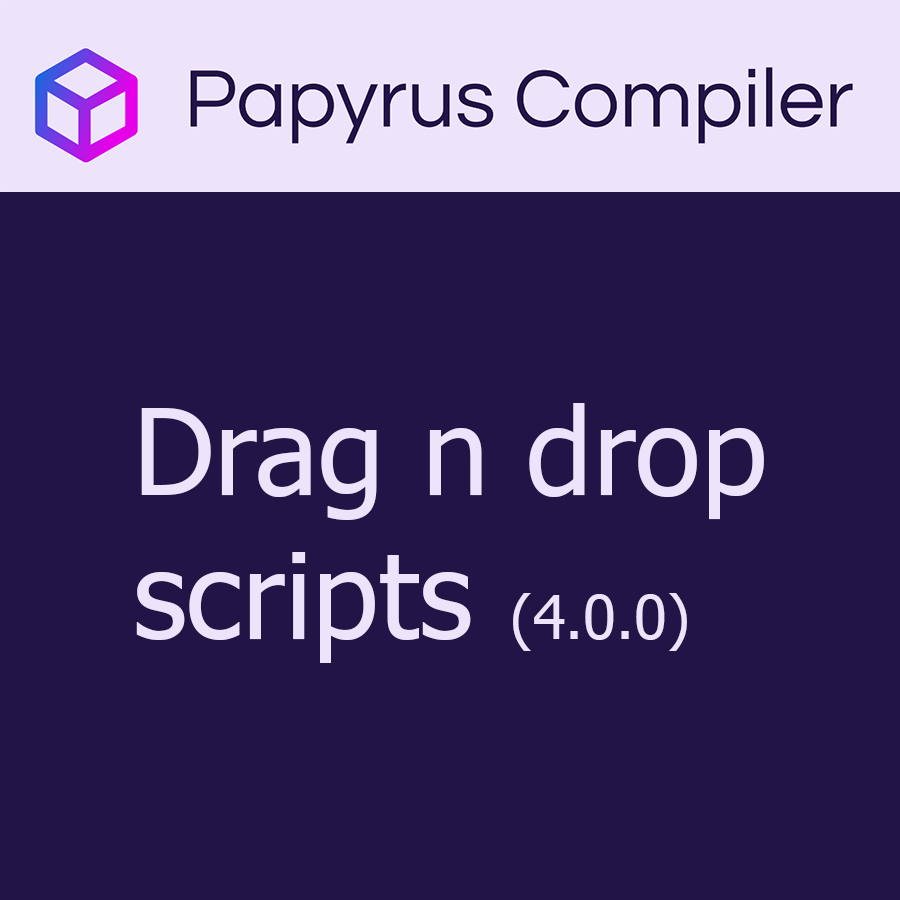
<style>
.page{position:relative;width:900px;height:900px;background:#221447}
.page>*{position:absolute;margin:0}
.t1{font:120px "Tahoma";color:#ede3fb}
.t2{font:60px "Tahoma";color:#ede3fb}
</style>
<div class="page">
<p class="t1" style="left:136px;top:403px;width:628px;height:260px">Drag n drop<br>scripts <span class="t2">(4.0.0)</span></p>
</div>
